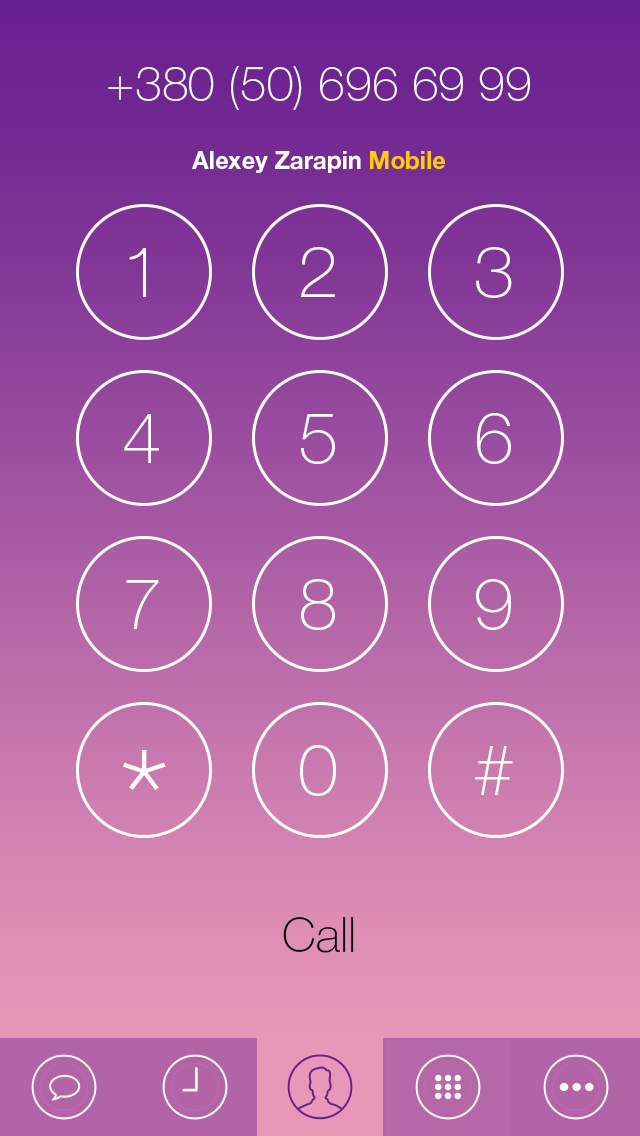
<style>
.page{position:relative;width:640px;height:1136px}
.page>*{position:absolute;margin:0}
.t1{font:48px "Helvetica-3-Thin";color:#ffffff}
.t2{font:24px "Helvetica-7-Bold";color:#ffffff}
.t3{font:24px "Helvetica-7-Bold";color:#ffcc00}
.t4{font:72px "Helvetica-3-Thin";color:#ffffff}
.t5{font:144px "Helvetica-3-Thin";color:#ffffff}
</style>
<div class="page">
<p class="t1" style="left:108px;top:66px;width:422px;height:44px">+380 (50) 696 69 99</p>
<p class="t2" style="left:192px;top:151px;width:253px;height:22px">Alexey Zarapin <span class="t3">Mobile</span></p>
<p class="t4" style="left:129px;top:248px;width:17px;height:49px">1</p>
<p class="t4" style="left:301px;top:247px;width:34px;height:50px">2</p>
<p class="t4" style="left:476px;top:247px;width:36px;height:51px">3</p>
<p class="t4" style="left:124px;top:414px;width:35px;height:49px">4</p>
<p class="t4" style="left:301px;top:414px;width:34px;height:50px">5</p>
<p class="t4" style="left:477px;top:413px;width:34px;height:51px">6</p>
<p class="t4" style="left:126px;top:580px;width:33px;height:49px">7</p>
<p class="t4" style="left:301px;top:579px;width:34px;height:51px">8</p>
<p class="t4" style="left:476px;top:579px;width:35px;height:51px">9</p>
<p class="t5" style="left:123px;top:750px;width:43px;height:41px">*</p>
<p class="t4" style="left:300px;top:745px;width:36px;height:51px">0</p>
<p class="t4" style="left:475px;top:746px;width:38px;height:49px">#</p>
</div>
